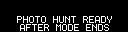
<style>
.page{position:relative;width:128px;height:32px;background:#000000}
.page>*{position:absolute;margin:0}
.t1{font:8px "Terminal";color:#ffffff}
</style>
<div class="page">
<p class="t1" style="left:17px;top:16px;width:95px;height:7px">PHOTO HUNT READY</p>
<p class="t1" style="left:20px;top:24px;width:89px;height:7px">AFTER MODE ENDS</p>
</div>
